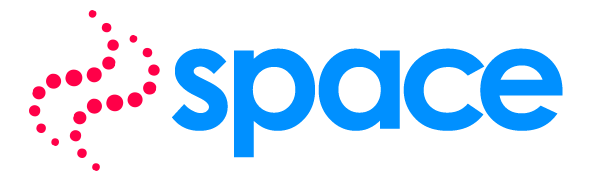
<style>
.page{position:relative;width:591px;height:180px;background:#ffffff}
.page>*{position:absolute;margin:0}
.t1{font:146.7px "CenturyGothic-Bold";letter-spacing:-0.06em;color:#0090ff}
.t2{font:146.7px "CenturyGothic-Bold";letter-spacing:-0.08em;color:#0090ff}
.t3{font:146.7px "CenturyGothic-Bold";letter-spacing:-0.12em;color:#0090ff}
</style>
<div class="page">
<p class="t1" style="left:172px;top:48px;width:391px;height:110px">sp<span class="t2">a</span><span class="t3">c</span>e</p>
</div>
